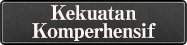
<style>
.page{position:relative;width:187px;height:45px}
.page>*{position:absolute;margin:0}
.t1{font:20px/18px "RyuminPro-Heavy";letter-spacing:-0.04em;color:#fff6f2}
</style>
<div class="page">
<p class="t1" style="left:32px;top:5px;width:124px;height:36px;text-align:center">Kekuatan<br>Komperhensif</p>
</div>
